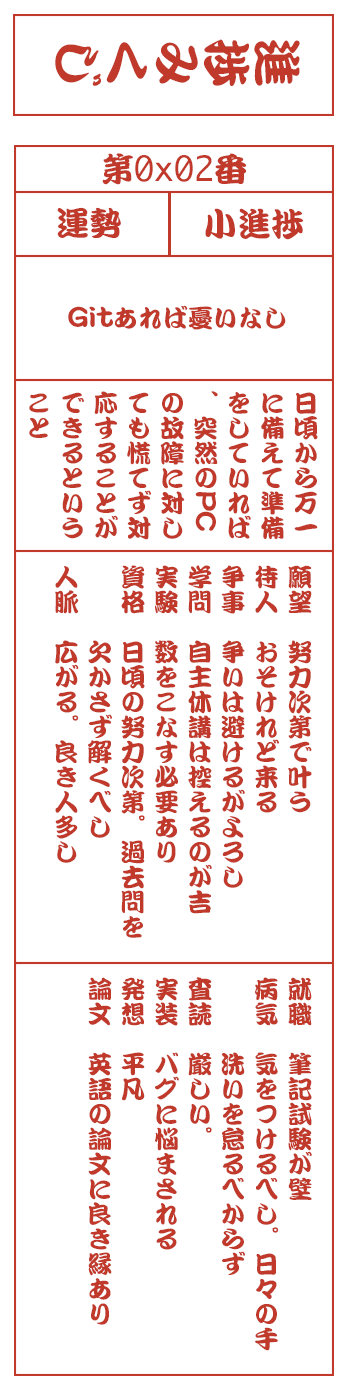
<style>
.page{position:relative;width:350px;height:1400px;background:#ffffff}
.page>*{position:absolute;margin:0}
.t1{font:50px "DFKanTeiRyu-XB-MP-RKSJ-H";color:#c0392b}
.t2{font:33.3px "Monaco";color:#c0392b}
.t3{font:33.3px "DFKanTeiRyu-XB-MP-RKSJ-H";color:#c0392b}
.t4{font:25px "DFKanTeiRyu-XB-MP-RKSJ-H";color:#c0392b}
.t5{font:25px/33.3px "DFKanTeiRyu-XB-MP-RKSJ-H";color:#c0392b}
</style>
<div class="page">
<p class="t1" style="left:55px;top:39px;width:245px;height:47px;rotate:90deg">進捗みくじ</p>
<p class="t2" style="left:102px;top:153px;width:144px;height:32px"><span class="t3">第</span>0x02<span class="t3">番</span></p>
<p class="t3" style="left:57px;top:207px;width:64px;height:31px">運勢</p>
<p class="t3" style="left:205px;top:208px;width:98px;height:32px">小進捗</p>
<p class="t4" style="left:68px;top:305px;width:218px;height:25px">Gitあれば憂いなし</p>
<p class="t5" style="left:29px;top:391px;width:289px;height:149px">日頃から万一<br>に備えて準備<br>をしていれば<br>、突然のPC<br>の故障に対し<br>ても慌てず対<br>応することが<br>できるという<br>こと</p>
<p class="t5" style="left:55px;top:565px;width:257px;height:373px">願望　努力次第で叶う<br>待人　おそけれど来る<br>争事　争いは避けるがよろし<br>学問　自主休講は控えるのが吉<br>実験　数をこなす必要あり<br>資格　日頃の努力次第。過去問を<br>　　　欠かさず解くべし<br>人脈　広がる。良き人多し</p>
<p class="t5" style="left:88px;top:977px;width:224px;height:374px">就職　筆記試験が壁<br>病気　気をつけるべし。日々の手<br>　　　洗いを怠るべからず<br>査読　厳しい。<br>実装　バグに悩まされる<br>発想　平凡<br>論文　英語の論文に良き縁あり</p>
</div>
